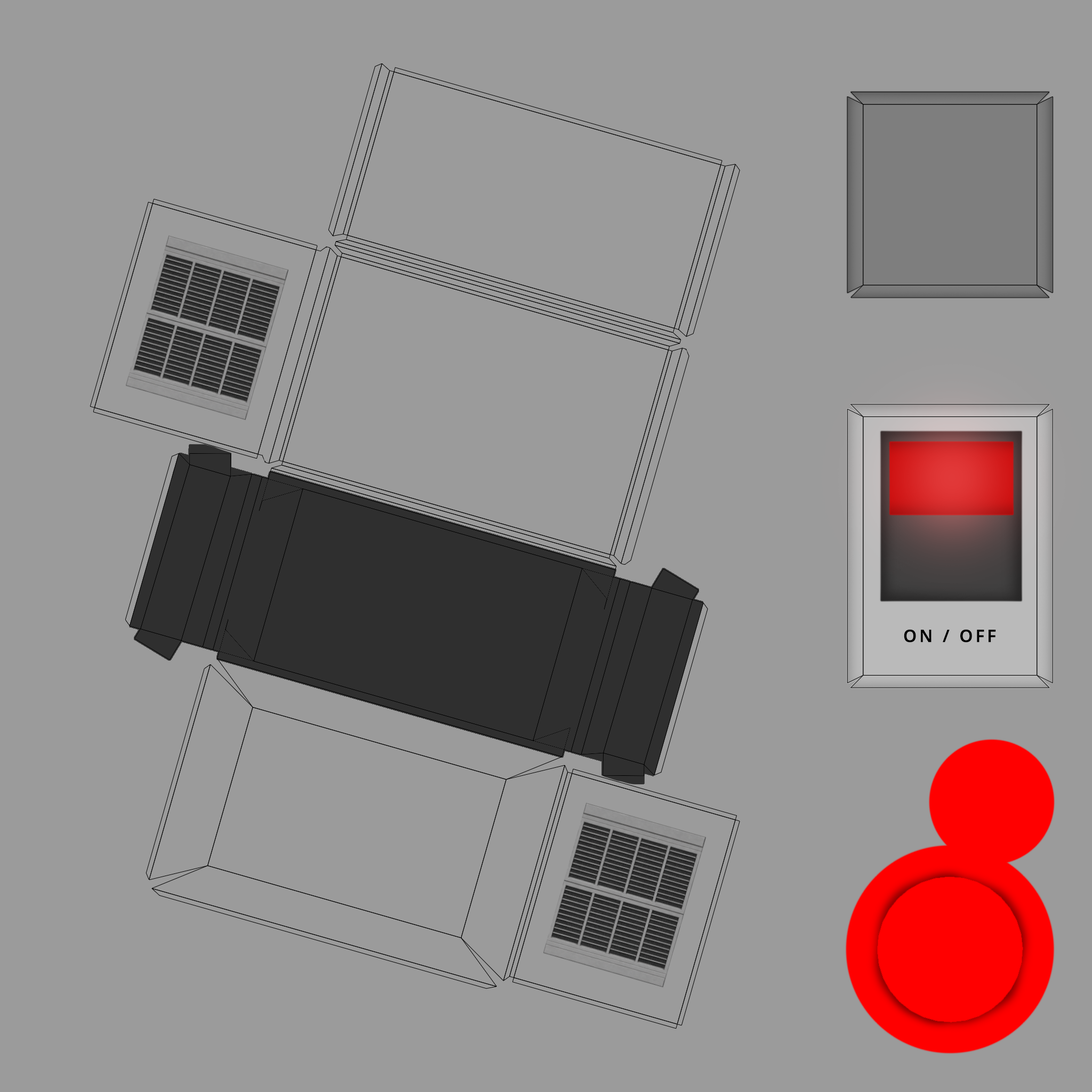
<style>
.page{position:relative;width:1092px;height:1092px;background:#9b9b9b}
.page>*{position:absolute;margin:0}
.t1{font:17.1px "NotoSans-SemiBold";letter-spacing:0.16em;color:#000000;text-transform:uppercase}
</style>
<div class="page">
<p class="t1" style="left:904px;top:629px;width:92px;height:14px">On / Off</p>
</div>
